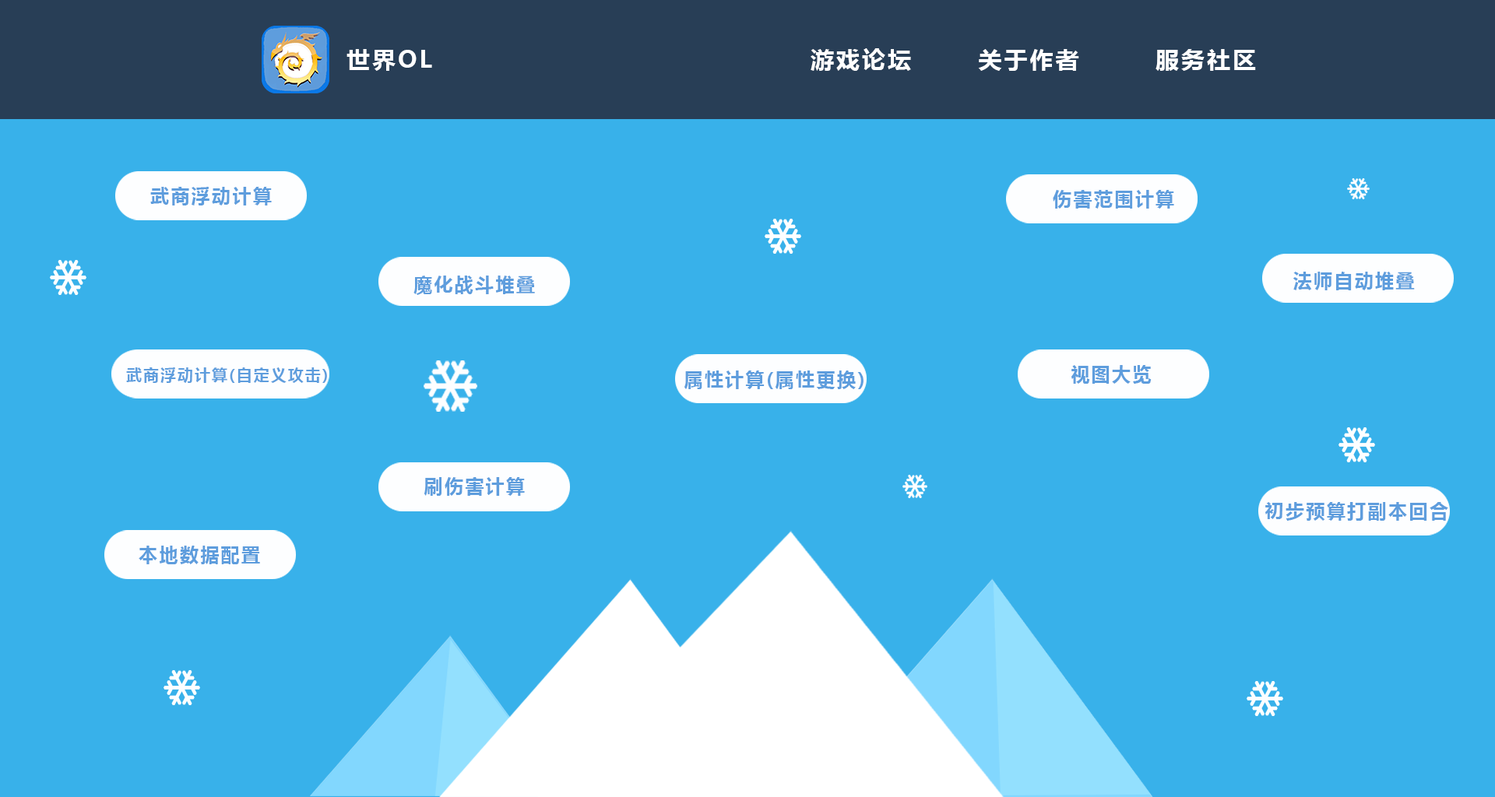
<style>
.page{position:relative;width:1495px;height:797px;background:#38b1ea}
.page>*{position:absolute;margin:0}
.t1{font:23.4px "MicrosoftYaHei-Bold";letter-spacing:0.1em;color:#ffffff}
.t2{font:18.7px "MicrosoftYaHei-Bold";letter-spacing:0.1em;color:#5e9ddd}
.t3{font:15.6px "MicrosoftYaHei-Bold";letter-spacing:0.1em;color:#5e9ddd}
</style>
<div class="page">
<p class="t1" style="left:347px;top:49px;width:85px;height:22px">世界OL</p>
<p class="t1" style="left:811px;top:48px;width:445px;height:23px">游戏论坛       关于作者        服务社区</p>
<p class="t2" style="left:150px;top:187px;width:122px;height:19px">武商浮动计算</p>
<p class="t2" style="left:1053px;top:190px;width:121px;height:19px">伤害范围计算</p>
<p class="t2" style="left:414px;top:276px;width:121px;height:19px">魔化战斗堆叠</p>
<p class="t2" style="left:1293px;top:272px;width:122px;height:18px">法师自动堆叠</p>
<p class="t2" style="left:1072px;top:365px;width:80px;height:19px">视图大览</p>
<p class="t3" style="left:126px;top:368px;width:201px;height:15px">武商浮动计算(自定义攻击)</p>
<p class="t2" style="left:684px;top:371px;width:180px;height:18px">属性计算(属性更换)</p>
<p class="t2" style="left:424px;top:477px;width:101px;height:19px">刷伤害计算</p>
<p class="t2" style="left:1266px;top:502px;width:183px;height:19px">初步预算打副本回合</p>
<p class="t2" style="left:139px;top:546px;width:121px;height:19px">本地数据配置</p>
</div>
